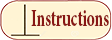
<style>
.page{position:relative;width:112px;height:40px;background:#fff4d4}
.page>*{position:absolute;margin:0}
.t1{font:24.5px "MinionPro-Bold";color:#881715;scale:0.62 1}
</style>
<div class="page">
<p class="t1" style="left:31px;top:10px;width:78px;height:17px">Instructions</p>
</div>
